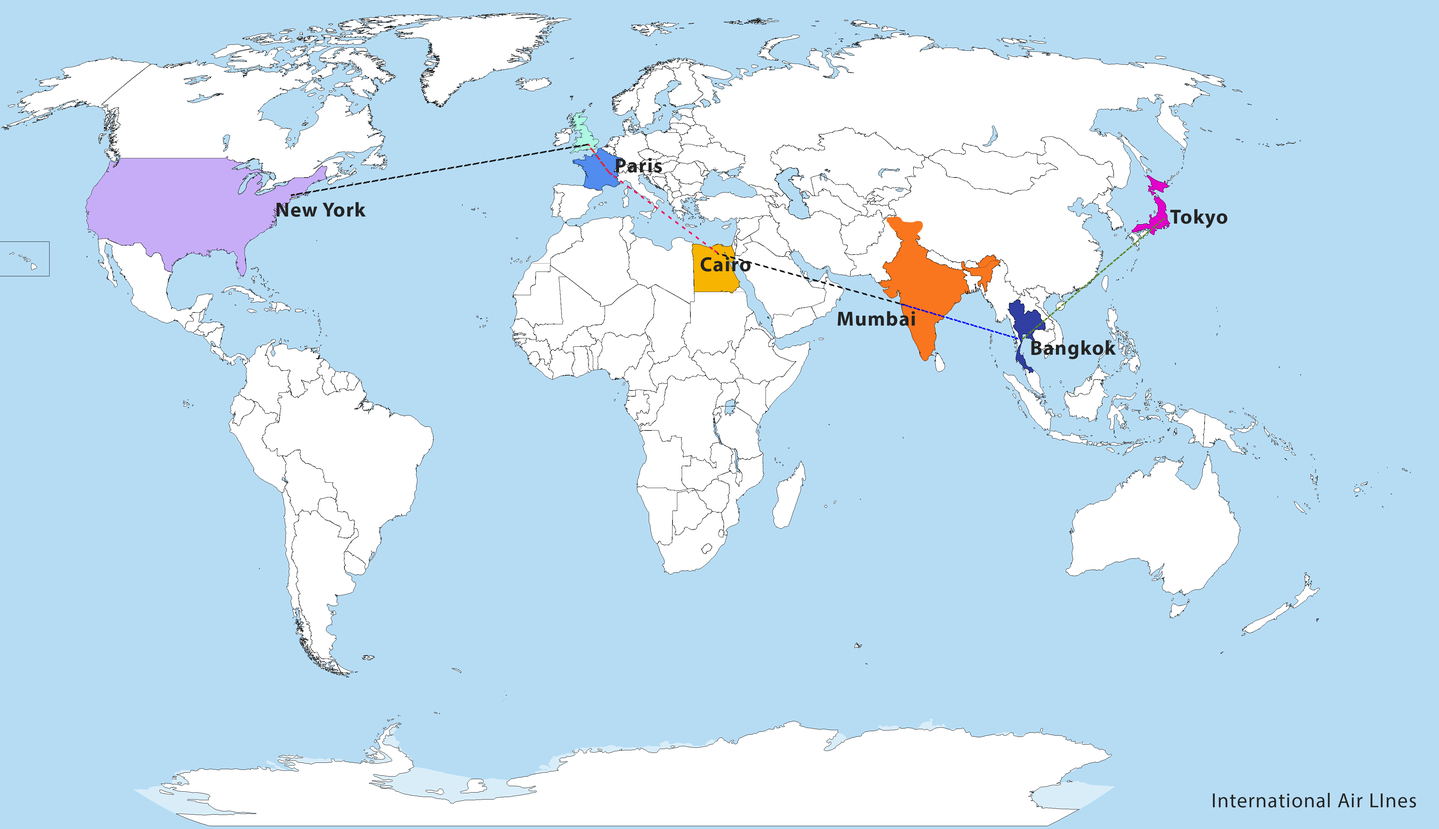
<style>
.page{position:relative;width:1439px;height:829px;background:#b6dcf4}
.page>*{position:absolute;margin:0}
.t1{font:20.5px "MyriadHebrew-Bold";letter-spacing:0.04em;color:#242424}
.t2{font:20.5px "MyriadHebrew-Regular";letter-spacing:0.04em;color:#242424}
</style>
<div class="page">
<p class="t1" style="left:616px;top:158px;width:46px;height:15px">Paris</p>
<p class="t1" style="left:277px;top:202px;width:89px;height:15px">New York</p>
<p class="t1" style="left:1170px;top:209px;width:57px;height:19px">Tokyo</p>
<p class="t1" style="left:701px;top:257px;width:49px;height:14px">Cairo</p>
<p class="t1" style="left:837px;top:311px;width:78px;height:15px">Mumbai</p>
<p class="t1" style="left:1031px;top:340px;width:85px;height:19px">Bangkok</p>
<p class="t2" style="left:1213px;top:793px;width:203px;height:14px">International Air LInes</p>
</div>
